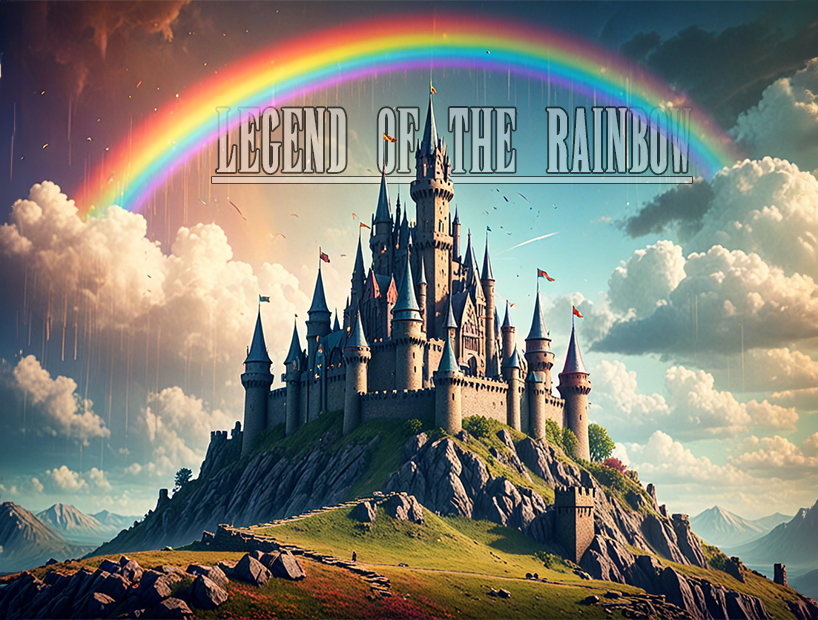
<style>
.page{position:relative;width:818px;height:620px}
.page>*{position:absolute;margin:0}
.t1{font:66px "New";text-transform:uppercase}
</style>
<div class="page">
<p class="t1" style="left:217px;top:108px;width:474px;height:66px">Legend of the Rainbow</p>
</div>
